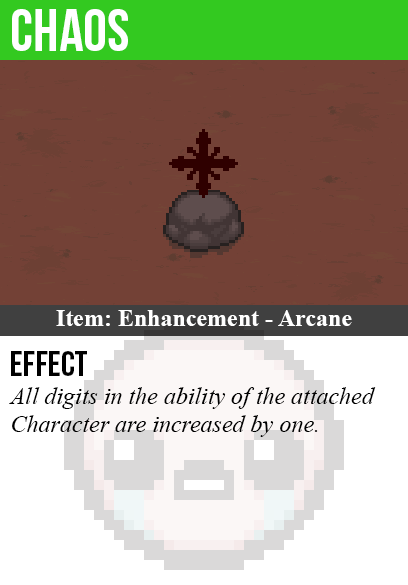
<style>
.page{position:relative;width:408px;height:585px;background:#734136}
.page>*{position:absolute;margin:0}
.t1{font:60px "BebasNeue";color:#ffffff}
.t2{font:24px "TimesNewRomanPS-BoldMT";color:#ffffff}
.t3{font:36px "BebasNeue";color:#000000}
.t4{font:24px "TimesNewRomanPS-ItalicMT";color:#000000}
</style>
<div class="page">
<p class="t1" style="left:12px;top:9px;width:116px;height:42px">chaos</p>
<p class="t2" style="left:56px;top:310px;width:296px;height:16px">Item: Enhancement - Arcane</p>
<p class="t3" style="left:11px;top:351px;width:76px;height:25px">Effect</p>
<p class="t4" style="left:9px;top:387px;width:367px;height:50px">All digits in the ability of the attached<br>Character are increased by one.</p>
</div>
